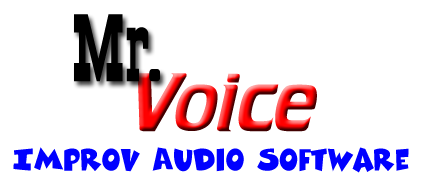
<style>
.page{position:relative;width:427px;height:179px;background:#ffffff}
.page>*{position:absolute;margin:0}
.t1{font:100px "OldTown";color:#000000}
.t2{font:72px "Crillee"}
.t3{font:30px "ComixHeavy";color:#0000ff}
</style>
<div class="page">
<p class="t1" style="left:74px;top:14px;width:86px;height:68px">Mr.</p>
<p class="t2" style="left:135px;top:73px;width:182px;height:59px">Voice</p>
<p class="t3" style="left:13px;top:147px;width:396px;height:26px">Improv Audio Software</p>
</div>
